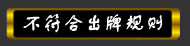
<style>
.page{position:relative;width:190px;height:46px;background:#333333}
.page>*{position:absolute;margin:0}
.t1{font:20px "FZSTK--GBK1-0";color:#ffffff;font-weight:bold}
</style>
<div class="page">
<p class="t1" style="left:23px;top:14px;width:140px;height:19px">不符合出牌规则</p>
</div>
